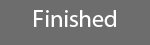
<style>
.page{position:relative;width:150px;height:45px;background:#6d6d6d}
.page>*{position:absolute;margin:0}
.t1{font:24px "MyriadPro-Regular";color:#ffffff}
</style>
<div class="page">
<p class="t1" style="left:34px;top:10px;width:82px;height:17px">Finished</p>
</div>
